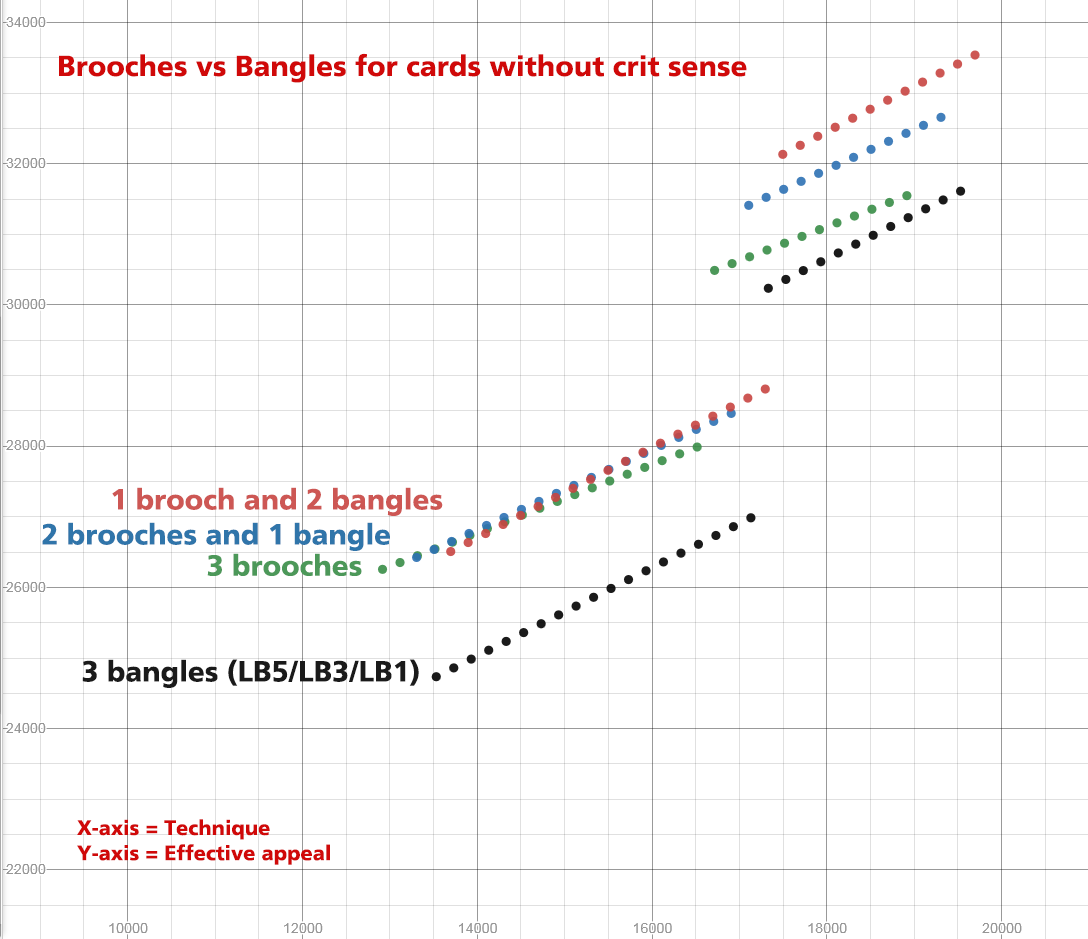
<style>
.page{position:relative;width:1088px;height:939px;background:#ffffff}
.page>*{position:absolute;margin:0}
.t1{font:29px "DorisPFC-Bold";color:#d00909}
.t2{font:29px "DorisPFC-Bold";color:#cd5754}
.t3{font:29px "DorisPFC-Bold";color:#3075aa}
.t4{font:29px "DorisPFC-Bold";color:#4c9859}
.t5{font:29px "DorisPFC-Bold";color:#1a1a1a}
.t6{font:21px "DorisPFC-Bold";color:#d00909}
</style>
<div class="page">
<p class="t1" style="left:59px;top:53px;width:688px;height:30px">Brooches vs Bangles for cards without crit sense</p>
<p class="t2" style="left:112px;top:487px;width:331px;height:29px">1 brooch and 2 bangles</p>
<p class="t3" style="left:42px;top:522px;width:348px;height:29px">2 brooches and 1 bangle</p>
<p class="t4" style="left:207px;top:553px;width:155px;height:23px">3 brooches</p>
<p class="t5" style="left:82px;top:659px;width:337px;height:29px">3 bangles (LB5/LB3/LB1)</p>
<p class="t6" style="left:77px;top:819px;width:253px;height:46px">X-axis = Technique<br>Y-axis = Effective appeal</p>
</div>
